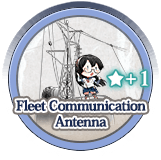
<style>
.page{position:relative;width:161px;height:160px;background:#ffffff}
.page>*{position:absolute;margin:0}
.t1{font:14px/16px "HeiseiMinStd-W7";letter-spacing:-0.04em;color:#192a52;font-weight:bold}
</style>
<div class="page">
<p class="t1" style="left:16px;top:99px;width:130px;height:28px;text-align:center">Fleet Communication<br>Antenna</p>
</div>
